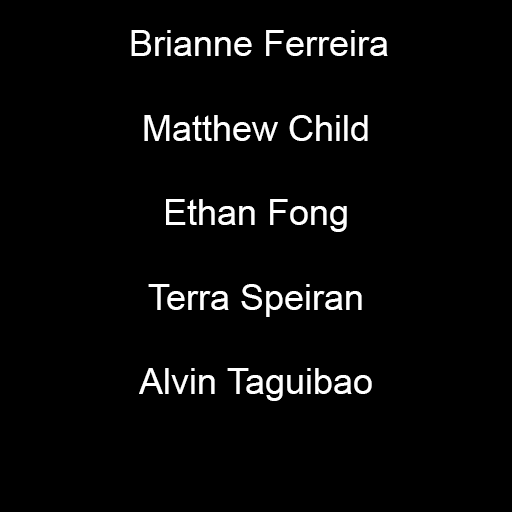
<style>
.page{position:relative;width:512px;height:512px;background:#000000}
.page>*{position:absolute;margin:0}
.t1{font:36px "ArialMT";color:#ffffff}
</style>
<div class="page">
<p class="t1" style="left:131px;top:30px;width:257px;height:26px">Brianne Ferreira</p>
<p class="t1" style="left:144px;top:115px;width:224px;height:26px">Matthew Child</p>
<p class="t1" style="left:166px;top:199px;width:181px;height:33px">Ethan Fong</p>
<p class="t1" style="left:148px;top:284px;width:214px;height:33px">Terra Speiran</p>
<p class="t1" style="left:139px;top:368px;width:233px;height:33px">Alvin Taguibao</p>
</div>
